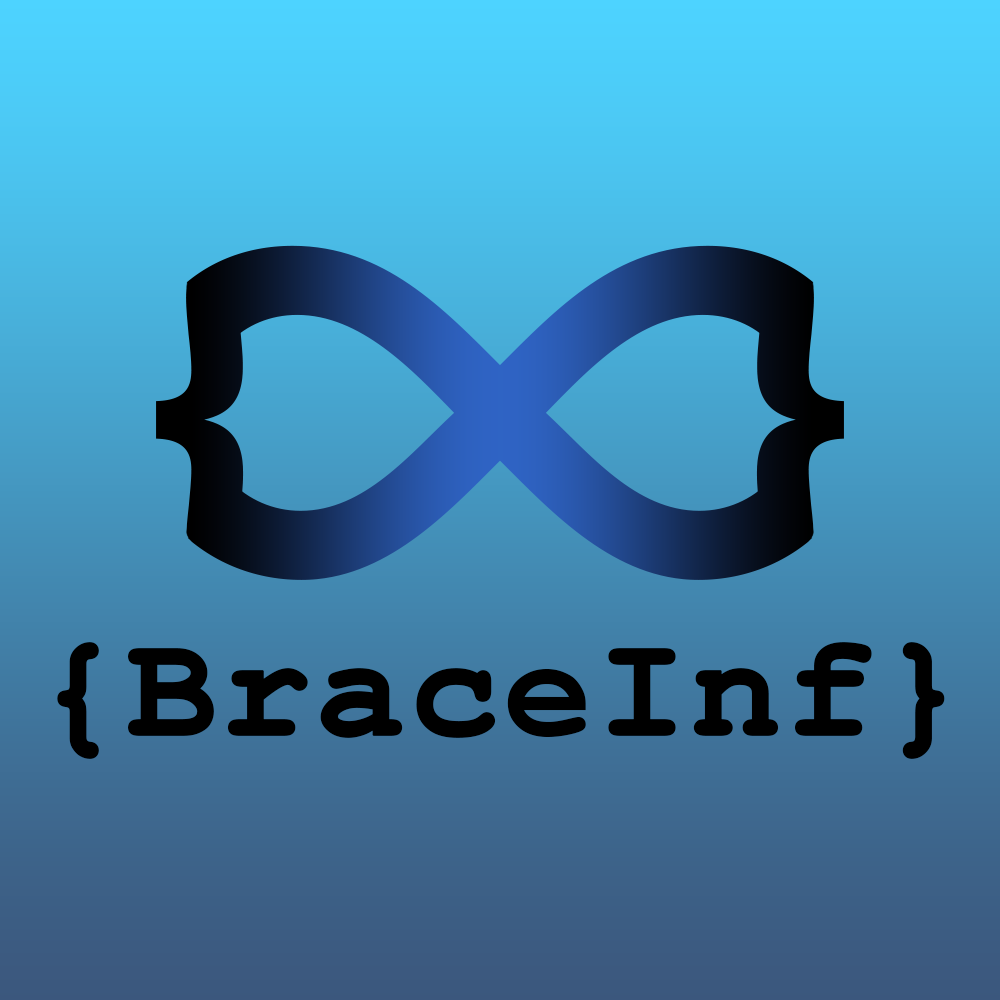
<style>
.page{position:relative;width:1000px;height:1000px}
.page>*{position:absolute;margin:0}
.t1{font:150px "CourierNewPS-BoldMT";color:#000000;font-weight:bold}
</style>
<div class="page">
<p class="t1" style="left:57px;top:642px;width:888px;height:117px">{BraceInf}</p>
</div>
